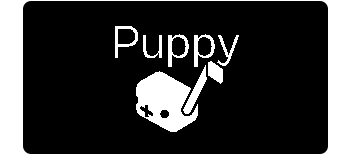
<style>
.page{position:relative;width:350px;height:155px;background:#000000}
.page>*{position:absolute;margin:0}
.t1{font:48px "CabinetGrotesk-Regular";color:#ffffff}
</style>
<div class="page">
<p class="t1" style="left:115px;top:26px;width:124px;height:41px">Puppy</p>
</div>
